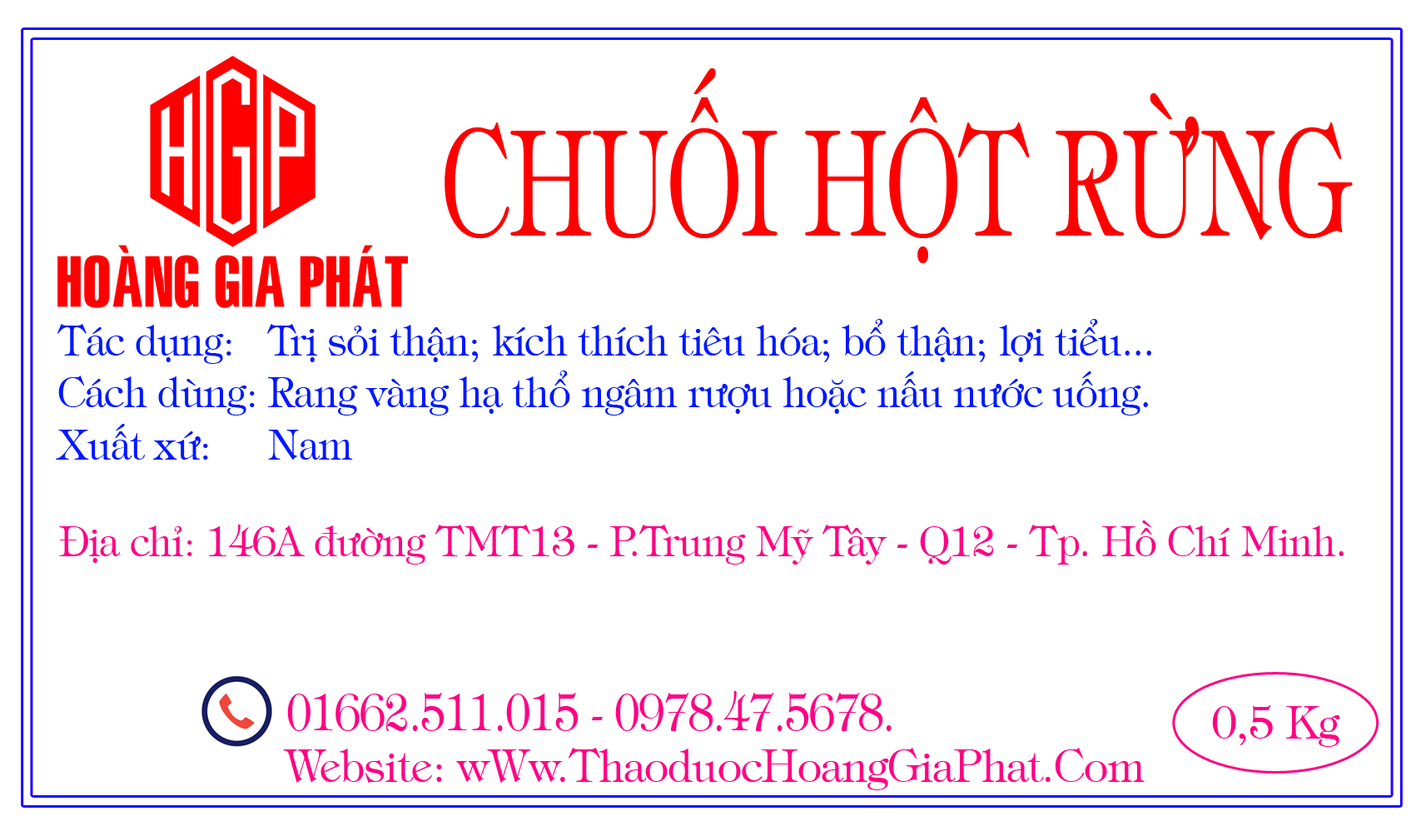
<style>
.page{position:relative;width:1426px;height:836px;background:#ffffff}
.page>*{position:absolute;margin:0}
.t1{font:148.1px "UVNBachTuyet";letter-spacing:-0.025em;color:#ff0000;scale:0.66 1}
.t2{font:39.9px/52px "UVNBachTuyet";letter-spacing:-0.025em;color:#0018ff}
.t3{font:39.9px/48.6px "UVNBachTuyet";letter-spacing:-0.025em;color:#ff0084}
.t4{font:50.8px "UVNBachTuyet";letter-spacing:-0.025em;color:#ff0084;scale:0.84 1}
.t5{font:43.4px "UVNBachTuyet";letter-spacing:-0.025em;color:#ff0084}
</style>
<div class="page">
<p class="t1" style="left:445px;top:67px;width:908px;height:196px">CHUỐI HỘT RỪNG</p>
<p class="t2" style="left:56px;top:319px;width:1288px;height:246px">Tác dụng:  Trị sỏi thận; kích thích tiêu hóa; bổ thận; lợi tiểu...<br>Cách dùng: Rang vàng hạ thổ ngâm rượu hoặc nấu nước uống.<br>Xuất xứ:  Nam<br><br><span class="t3">Địa chỉ: 146A đường TMT13 - P.Trung Mỹ Tây - Q12 - Tp. Hồ Chí Minh.</span></p>
<p class="t4" style="left:287px;top:691px;width:605px;height:40px">01662.511.015 - 0978.47.5678.</p>
<p class="t5" style="left:1212px;top:705px;width:129px;height:42px">0,5 Kg</p>
<p class="t5" style="left:283px;top:748px;width:862px;height:42px">Website: wWw.ThaoduocHoangGiaPhat.Com</p>
</div>
